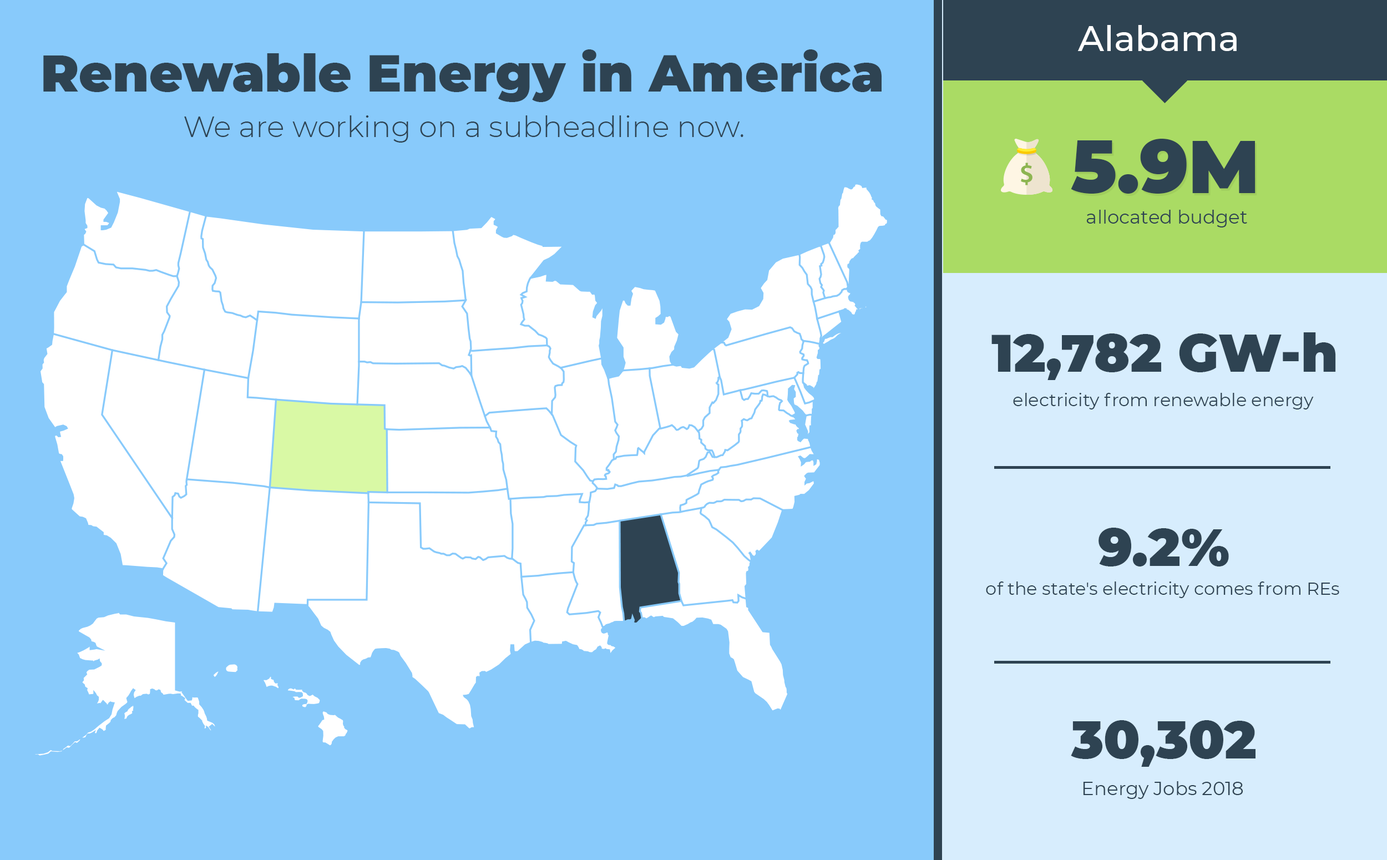
<style>
.page{position:relative;width:1387px;height:860px;background:#88cafb}
.page>*{position:absolute;margin:0}
.t1{font:35.5px "Montserrat-Medium";color:#ffffff}
.t2{font:51.6px "Montserrat-Black";color:#2e4352}
.t3{font:29.4px "Montserrat-Light";color:#2e4352}
.t4{font:74.3px "Montserrat-Black";color:#2e4352}
.t5{font:18.9px "Montserrat-Regular";color:#2e4352}
.t6{font:52.7px "Montserrat-Black";color:#2e4352}
.t7{font:17.8px "Montserrat-Regular";color:#2e4352}
</style>
<div class="page">
<p class="t1" style="left:1077px;top:25px;width:159px;height:26px">Alabama</p>
<p class="t2" style="left:43px;top:49px;width:838px;height:53px">Renewable Energy in America</p>
<p class="t3" style="left:184px;top:115px;width:559px;height:28px">We are working on a subheadline now.</p>
<p class="t4" style="left:1071px;top:139px;width:184px;height:55px">5.9M</p>
<p class="t5" style="left:1086px;top:210px;width:161px;height:17px">allocated budget</p>
<p class="t6" style="left:991px;top:332px;width:345px;height:48px">12,782 GW-h</p>
<p class="t7" style="left:1013px;top:393px;width:301px;height:16px">electricity from renewable energy</p>
<p class="t6" style="left:1098px;top:528px;width:131px;height:38px">9.2%</p>
<p class="t7" style="left:986px;top:581px;width:353px;height:17px">of the state's electricity comes from REs</p>
<p class="t6" style="left:1071px;top:720px;width:184px;height:47px">30,302</p>
<p class="t5" style="left:1083px;top:781px;width:160px;height:18px">Energy Jobs 2018</p>
</div>
